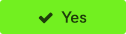
<style>
.page{position:relative;width:126px;height:34px;background:#72f020}
.page>*{position:absolute;margin:0}
.t1{font:16px "HKGrotesk-Medium";color:#1e3e0a;font-weight:bold}
</style>
<div class="page">
<p class="t1" style="left:61px;top:11px;width:26px;height:12px">Yes</p>
</div>
